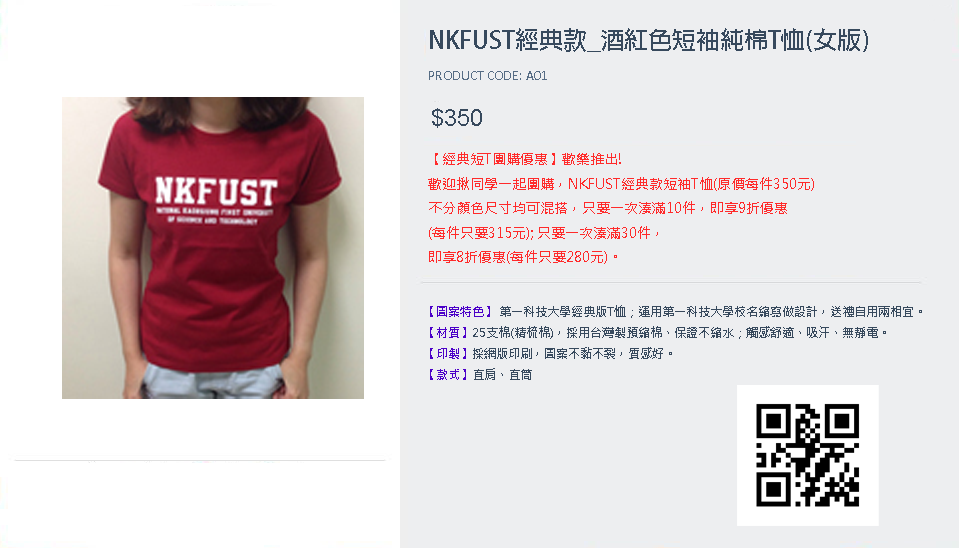
<style>
.page{position:relative;width:959px;height:548px;background:#edeef0}
.page>*{position:absolute;margin:0}
.t1{font:24px "AdobeFanHeitiStd-Bold";color:#37495d}
.t2{font:14px "Calibri";color:#566c84}
.t3{font:24px "ArialMT";color:#37495d}
.t4{font:14px "MicrosoftJhengHeiRegular";color:#ff2a2a}
.t5{font:12px "MicrosoftJhengHeiRegular";color:#37495d}
.t6{font:12px "MicrosoftJhengHeiRegular";color:#4b00c8}
</style>
<div class="page">
<p class="t1" style="left:430px;top:28px;width:438px;height:24px">NKFUST經典款_酒紅色短袖純棉T恤(女版)</p>
<p class="t2" style="left:429px;top:71px;width:118px;height:9px">PRODUCT CODE: A01</p>
<p class="t3" style="left:432px;top:108px;width:50px;height:20px">$350</p>
<p class="t4" style="left:428px;top:152px;width:386px;height:112px">【經典短T團購優惠】歡樂推出!<br>歡迎揪同學一起團購，NKFUST經典款短袖T恤(原價每件350元)<br>不分顏色尺寸均可混搭，只要一次湊滿10件，即享9折優惠<br>(每件只要315元); 只要一次湊滿30件，<br>即享8折優惠(每件只要280元)。</p>
<p class="t5" style="left:430px;top:305px;width:492px;height:75px"><span class="t6">【圖案特色】</span> 第一科技大學經典版T恤；運用第一科技大學校名縮寫做設計，送禮自用兩相宜。<br><span class="t6">【材質】</span>25支棉(精梳棉)，採用台灣製預縮棉、保證不縮水；觸感舒適、吸汗、無靜電。<br><span class="t6">【印製】</span>採網版印刷，圖案不黏不裂，質感好。<br><span class="t6">【款式】</span>直肩、直筒</p>
</div>
